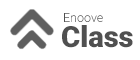
<style>
.page{position:relative;width:140px;height:60px;background:#ffffff}
.page>*{position:absolute;margin:0}
.t1{font:12.5px "Roboto-Light";color:#505050}
.t2{font:29.2px "Roboto-Black";color:#505050}
</style>
<div class="page">
<p class="t1" style="left:64px;top:13px;width:39px;height:9px">Enoove</p>
<p class="t2" style="left:62px;top:25px;width:71px;height:23px">Class</p>
</div>
